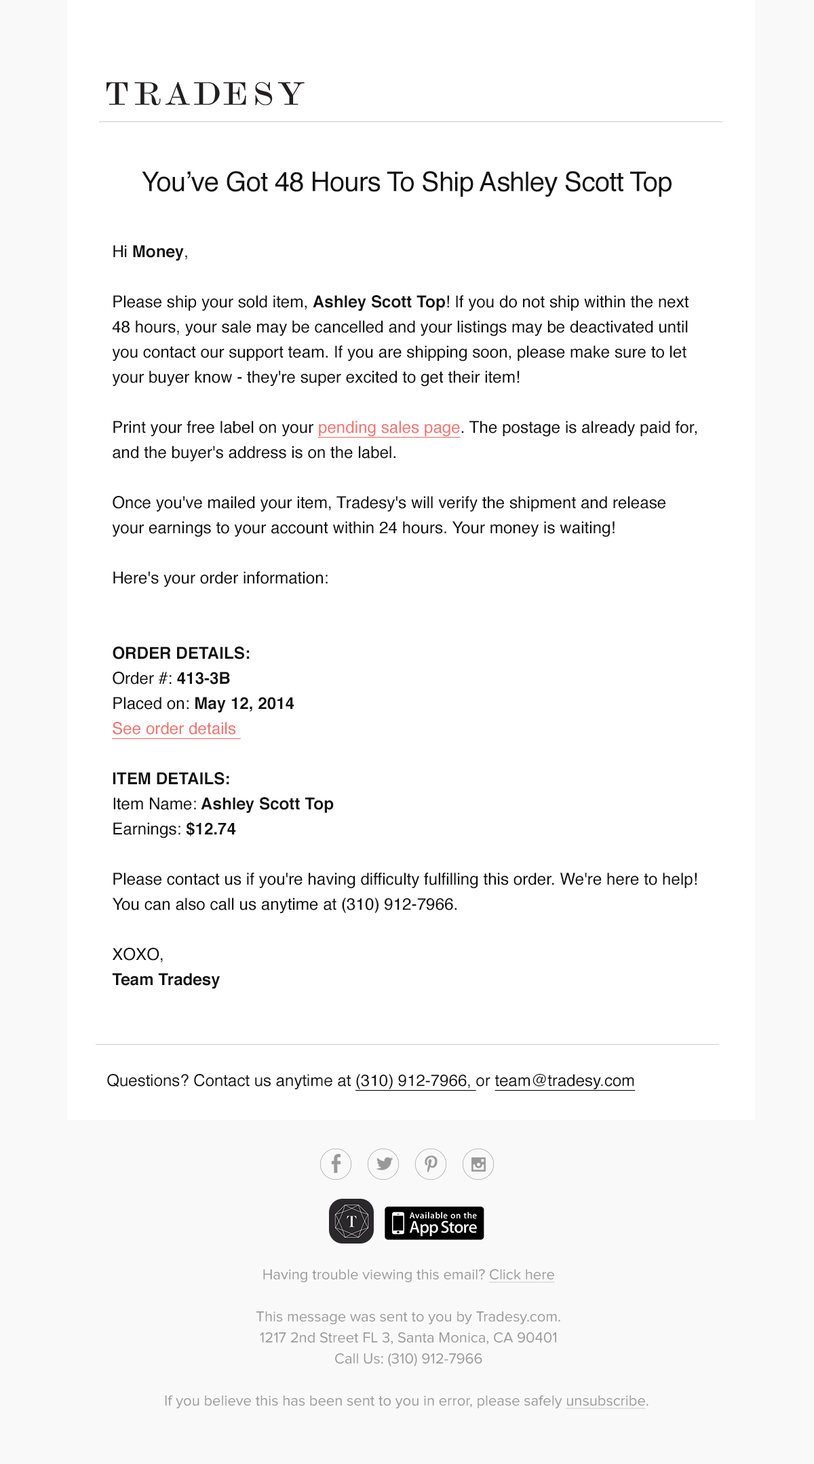
<style>
.page{position:relative;width:814px;height:1464px;background:#ffffff}
.page>*{position:absolute;margin:0}
.t1{font:27.1px "Helvetica";letter-spacing:-0.02em;color:#111111}
.t2{font:16.4px/25.1px "Helvetica";color:#111111}
.t3{font:16.4px/25.1px "Helvetica-Bold";color:#111111}
.t4{font:16.4px/25.1px "Helvetica";color:#ee7873;text-decoration:underline}
.t5{font:16.3px "Helvetica";color:#111111}
.t6{font:16.3px "Helvetica";color:#111111;text-decoration:underline}
.t7{font:14.9px/21px "ProximaNova-Regular";color:#999999}
.t8{font:14.9px/21px "ProximaNova-Regular";color:#999999;text-decoration:underline}
</style>
<div class="page">
<p class="t1" style="left:142px;top:171px;width:530px;height:26px">You’ve Got 48 Hours To Ship Ashley Scott Top</p>
<p class="t2" style="left:112px;top:245px;width:585px;height:744px">Hi <span class="t3">Money</span>,<br><br>Please ship your sold item, <span class="t3">Ashley Scott Top</span>! If you do not ship within the next 48 hours, your sale may be cancelled and your listings may be deactivated until you contact our support team. If you are shipping soon, please make sure to let your buyer know - they're super excited to get their item!<br><br>Print your free label on your <span class="t4">pending sales page</span>. The postage is already paid for, and the buyer's address is on the label.<br><br>Once you've mailed your item, Tradesy's will verify the shipment and release your earnings to your account within 24 hours. Your money is waiting!<br><br>Here's your order information:<br><br><br><span class="t3">ORDER DETAILS:<br></span>Order #: <span class="t3">413-3B<br></span>Placed on: <span class="t3">May 12, 2014<br></span><span class="t4">See order details <br><br></span><span class="t3">ITEM DETAILS:<br></span>Item Name:<span class="t3"> Ashley Scott Top<br></span>Earnings: <span class="t3">$12.74<br></span><br>Please contact us if you're having difficulty fulfilling this order. We're here to help! You can also call us anytime at (310) 912-7966.<br><br>XOXO,<br><span class="t3">Team Tradesy</span></p>
<p class="t5" style="left:107px;top:1074px;width:529px;height:17px">Questions? Contact us anytime at <span class="t6">(310) 912-7966, </span>or <span class="t6">team@tradesy.com</span></p>
<p class="t7" style="left:165px;top:1269px;width:484px;height:140px;text-align:center">Having trouble viewing this email? <span class="t8">Click here<br></span><br>This message was sent to you by Tradesy.com.<br>1217 2nd Street FL 3, Santa Monica, CA 90401<br>Call Us: (310) 912-7966<br><br>If you believe this has been sent to you in error, please safely <span class="t8">unsubscribe</span>.</p>
</div>
